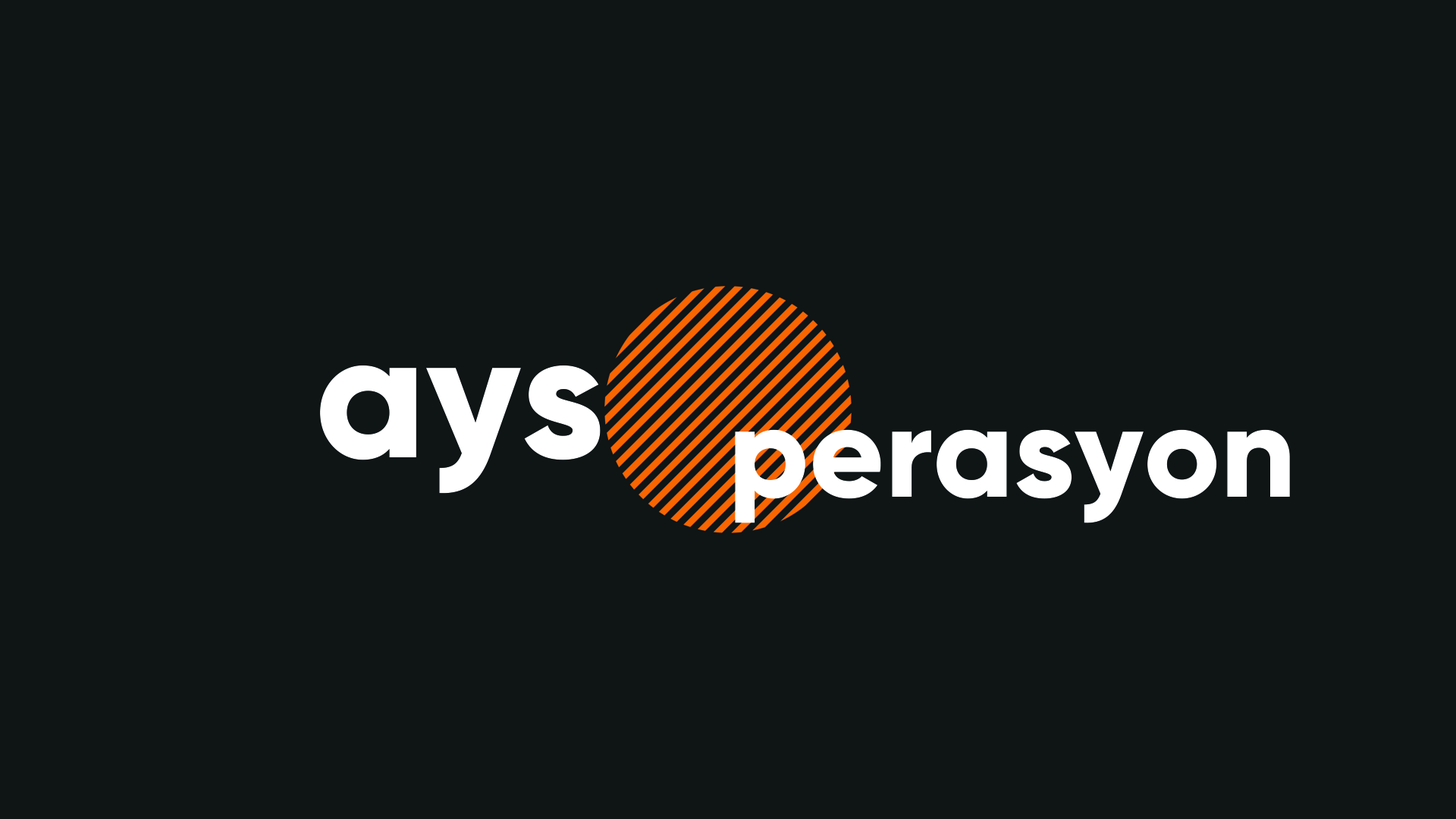
<style>
.page{position:relative;width:1456px;height:819px;background:#0f1415}
.page>*{position:absolute;margin:0}
.t1{font:178.7px "Gilroy-ExtraBold";color:#ffffff}
.t2{font:130.1px "Gilroy-ExtraBold";color:#ffffff}
</style>
<div class="page">
<p class="t1" style="left:320px;top:365px;width:281px;height:129px">ays</p>
<p class="t2" style="left:735px;top:429px;width:555px;height:94px">perasyon</p>
</div>
